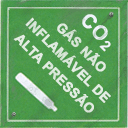
<style>
.page{position:relative;width:128px;height:128px}
.page>*{position:absolute;margin:0}
.t1{font:13.3px/18.7px "Arial-BoldMT";color:#e0ebe0;text-transform:uppercase;font-weight:bold}
</style>
<div class="page">
<p class="t1" style="left:13px;top:17px;width:98px;height:96px;text-align:center;rotate:45deg">Gás não<br>inflamável de<br>alta pressão</p>
</div>
